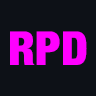
<style>
.page{position:relative;width:96px;height:96px;background:#0d1117}
.page>*{position:absolute;margin:0}
.t1{font:47px "HelveticaNeue-CondensedBlack";color:#ff00ff}
</style>
<div class="page">
<p class="t1" style="left:10px;top:31px;width:77px;height:34px">RPD</p>
</div>
